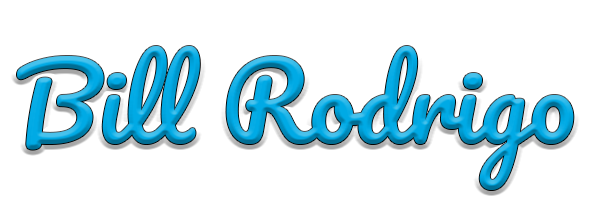
<style>
.page{position:relative;width:590px;height:210px;background:#ffffff}
.page>*{position:absolute;margin:0}
.t1{font:102.4px "Pacifico-Regular"}
</style>
<div class="page">
<p class="t1" style="left:17px;top:46px;width:557px;height:144px">Bill Rodrigo</p>
</div>
